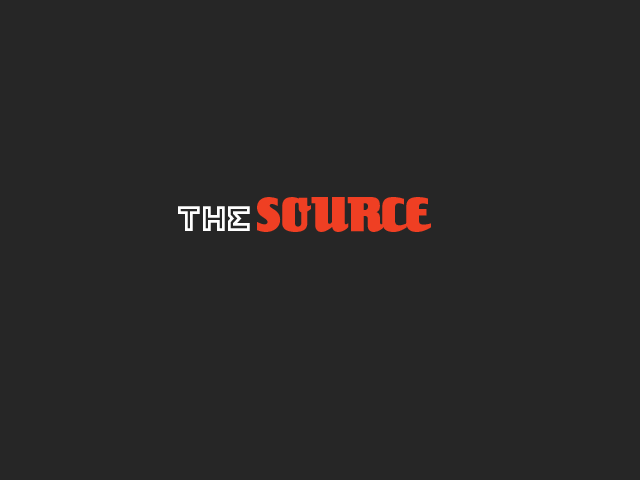
<style>
.page{position:relative;width:640px;height:480px;background:#262626}
.page>*{position:absolute;margin:0}
.t1{font:43px "EinhornICG";letter-spacing:-0.01em;color:#ef3f23}
.t2{font:38px "EastBlocICG-Open";letter-spacing:-0.01em;color:#ffffff;text-transform:uppercase}
</style>
<div class="page">
<p class="t1" style="left:178px;top:197px;width:253px;height:35px"><span class="t2">THE</span>SOURCE</p>
</div>
